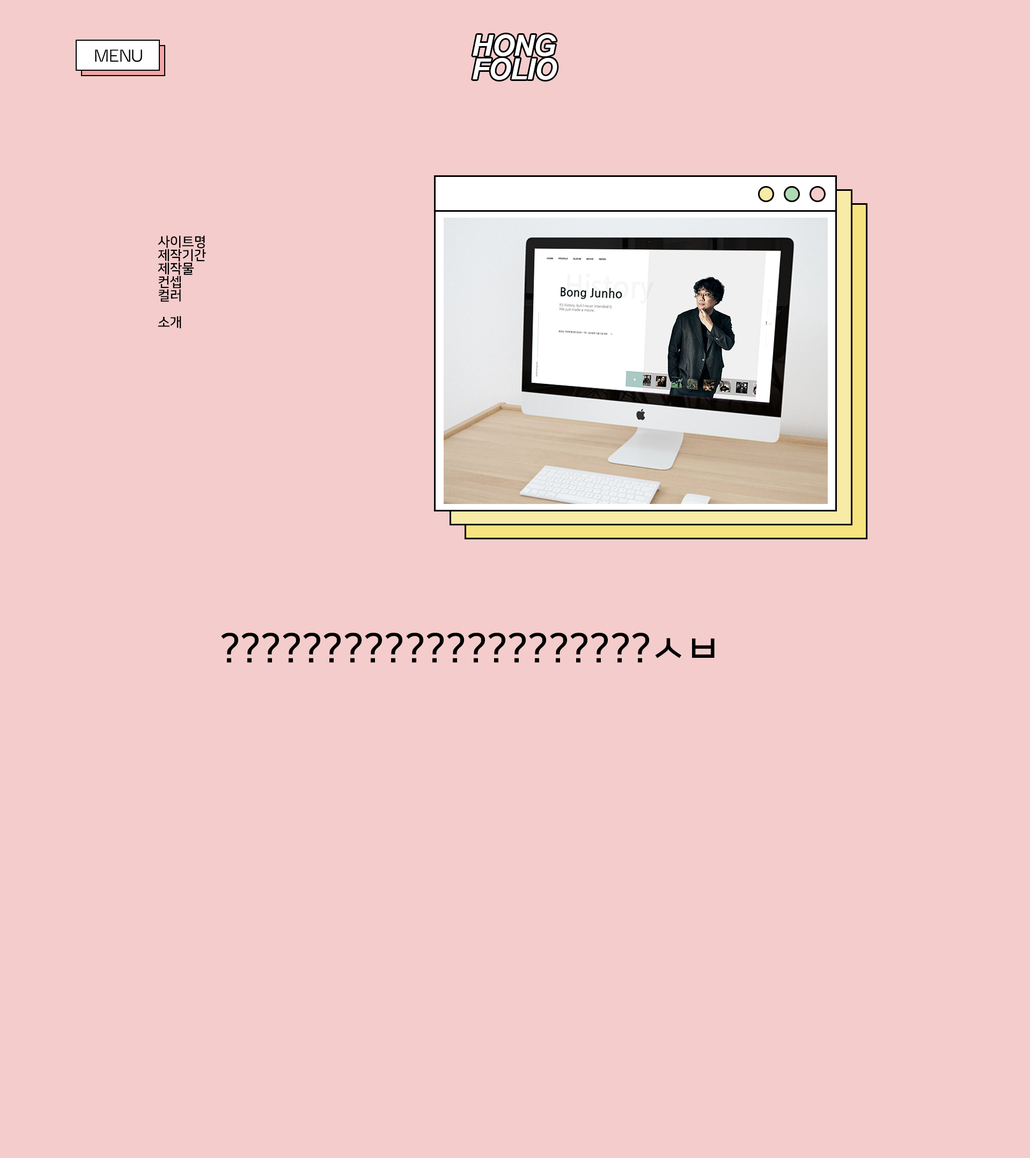
<style>
.page{position:relative;width:1030px;height:1158px;background:#f4cccc}
.page>*{position:absolute;margin:0}
.t1{font:28.8px/23.4px "Arial-BoldItalicMT";letter-spacing:-0.03em;color:#ffffff}
.t2{font:21.4px "DarkerGrotesque-Medium";letter-spacing:-0.01em;color:#000000}
.t3{font:13.4px/13.4px "NanumSquareB";letter-spacing:-0.01em;color:#000000}
.t4{font:38.6px "NanumSquareB";letter-spacing:-0.01em;color:#000000}
</style>
<div class="page">
<p class="t1" style="left:472px;top:34px;width:85px;height:46px">HONG<br>FOLIO</p>
<p class="t2" style="left:95px;top:49px;width:47px;height:13px">MENU</p>
<p class="t3" style="left:158px;top:235px;width:48px;height:94px">사이트명<br>제작기간<br>제작물<br>컨셉<br>컬러<br><br>소개</p>
<p class="t4" style="left:221px;top:633px;width:493px;height:30px">?????????????????????ㅅㅂ</p>
</div>
